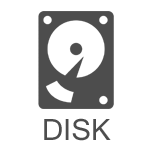
<style>
.page{position:relative;width:150px;height:150px;background:#ffffff}
.page>*{position:absolute;margin:0}
.t1{font:29.3px "MicrosoftSansSerif";color:#4d4d4d}
</style>
<div class="page">
<p class="t1" style="left:44px;top:118px;width:67px;height:23px">DISK</p>
</div>
